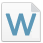
<style>
.page{position:relative;width:43px;height:43px}
.page>*{position:absolute;margin:0}
.t1{font:32px "Corbel";color:#5d98b7;font-weight:bold;scale:1.1 1}
</style>
<div class="page">
<p class="t1" style="left:5px;top:13px;width:32px;height:23px">W</p>
</div>
